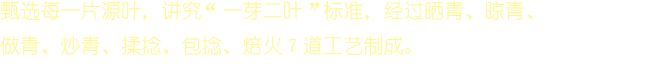
<style>
.page{position:relative;width:661px;height:66px;background:#ffffff}
.page>*{position:absolute;margin:0}
.t1{font:20px "YouYuan";letter-spacing:0.01em;color:#fff799}
</style>
<div class="page">
<p class="t1" style="left:0px;top:0px;width:533px;height:56px">甄选每一片源叶，讲究“一芽二叶”标准，经过晒青、晾青、<br>做青、炒青、揉捻、包捻、焙火7道工艺制成。</p>
</div>
